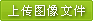
<style>
.page{position:relative;width:93px;height:21px}
.page>*{position:absolute;margin:0}
.t1{font:12px "SimSun";letter-spacing:0.1em;color:#ffffff}
</style>
<div class="page">
<p class="t1" style="left:8px;top:5px;width:77px;height:11px">上传图像文件</p>
</div>
